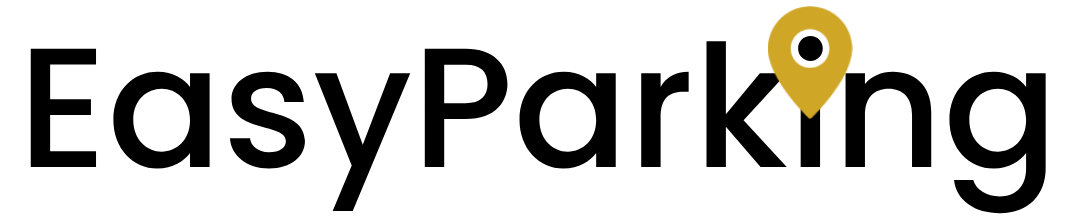
<style>
.page{position:relative;width:1080px;height:220px;background:#ffffff}
.page>*{position:absolute;margin:0}
.t1{font:170px "Poppins-Medium";color:#000000}
</style>
<div class="page">
<p class="t1" style="left:30px;top:36px;width:1016px;height:178px">EasyParking</p>
</div>
